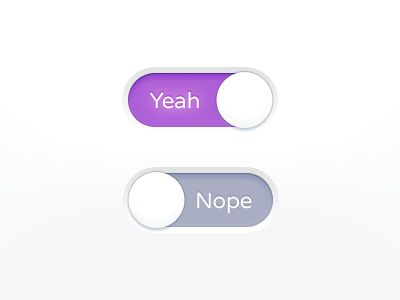
<style>
.page{position:relative;width:400px;height:300px;background:#ffffff}
.page>*{position:absolute;margin:0}
.t1{font:22px "VarelaRound-Regular";color:#ffffff}
</style>
<div class="page">
<p class="t1" style="left:150px;top:91px;width:49px;height:18px">Yeah</p>
<p class="t1" style="left:197px;top:192px;width:55px;height:22px">Nope</p>
</div>
